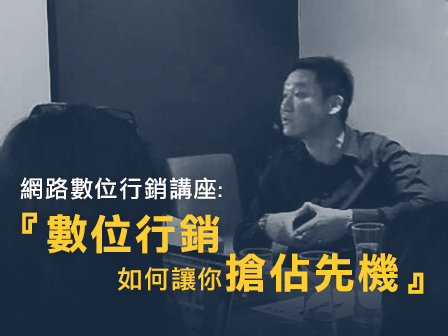
<style>
.page{position:relative;width:448px;height:336px}
.page>*{position:absolute;margin:0}
.t1{font:23.6px "DFLiHeiStd-W5";letter-spacing:0.05em;color:#ffffff}
.t2{font:23.6px "DFLiHeiStd-W3";letter-spacing:0.05em;color:#ffffff}
.t3{font:42.3px "DFLiHeiStd-W7";letter-spacing:0.05em;color:#fece2f}
.t4{font:25.4px "DFLiHeiStd-W5";letter-spacing:0.05em;color:#fece2f}
</style>
<div class="page">
<p class="t1" style="left:20px;top:177px;width:202px;height:23px">網路數位行銷講座<span class="t2">:</span></p>
<p class="t3" style="left:22px;top:212px;width:198px;height:42px">『數位行銷</p>
<p class="t3" style="left:118px;top:253px;width:306px;height:41px"><span class="t4">如何讓你</span>搶佔先機』</p>
</div>
